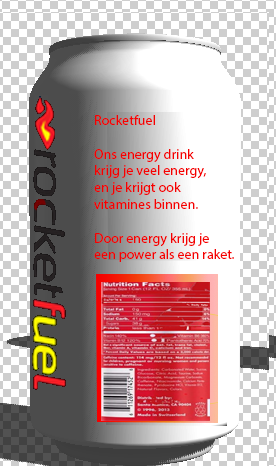
<style>
.page{position:relative;width:276px;height:466px;background:#ffffff}
.page>*{position:absolute;margin:0}
.t1{font:14px "MyriadPro-Regular";color:#f50000}
</style>
<div class="page">
<p class="t1" style="left:94px;top:115px;width:140px;height:147px">Rocketfuel<br><br>Ons energy drink<br>krijg je veel energy, <br>en je krijgt ook <br>vitamines binnen.<br><br>Door energy krijg je <br>een power als een raket.</p>
</div>
